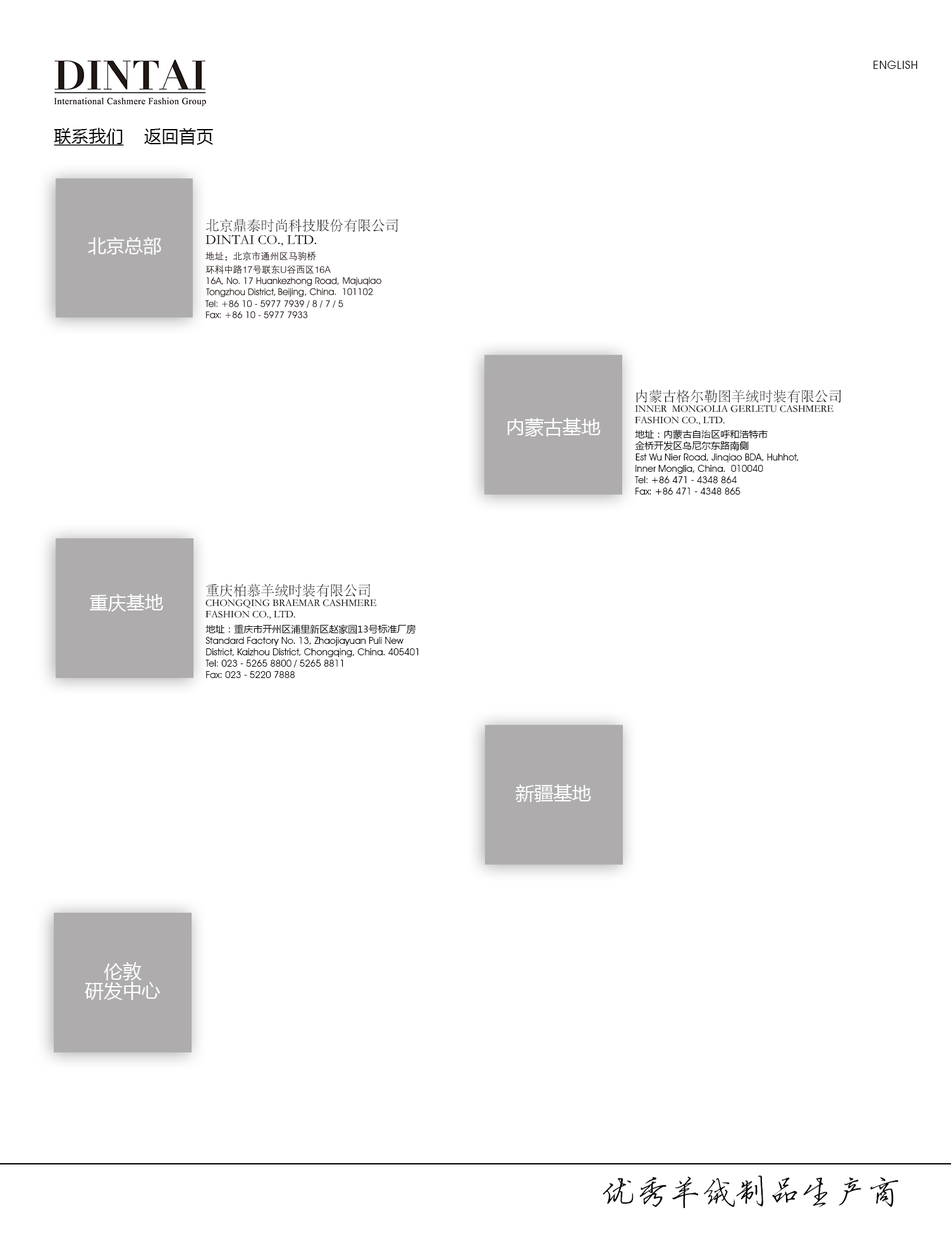
<style>
.page{position:relative;width:951px;height:1253px;background:#ffffff}
.page>*{position:absolute;margin:0}
.t1{font:11.4px "AvantGardeITCbyBT-Book";letter-spacing:0.05em;color:#000000}
.t2{font:17.4px "MicrosoftYaHei";color:#000000;text-decoration:underline}
.t3{font:17.4px "MicrosoftYaHei";color:#000000}
.t4{font:13.8px/15.2px "STSong";color:#000000}
.t5{font:18.4px "MicrosoftYaHei";color:#ffffff}
.t6{font:10.1px/11.4px "STSong";color:#000000}
.t7{font:18.9px "MicrosoftYaHei";color:#ffffff}
.t8{font:9.5px "AvantGardeITCbyBT-Book";color:#000000}
.t9{font:9.5px "MicrosoftYaHei";color:#000000}
.t10{font:18.9px/19px "MicrosoftYaHei";color:#ffffff}
.t11{font:33.3px "FZYBXSJW--GB1-0";color:#000000}
</style>
<div class="page">
<p class="t1" style="left:874px;top:61px;width:44px;height:8px">ENGLISH</p>
<p class="t2" style="left:54px;top:128px;width:159px;height:18px">联系我们<span class="t3">    返回首页</span></p>
<p class="t4" style="left:206px;top:219px;width:193px;height:28px">北京鼎泰时尚科技股份有限公司<br>DINTAI CO., LTD.</p>
<p class="t5" style="left:88px;top:237px;width:73px;height:18px">北京总部</p>
<p class="t6" style="left:635px;top:390px;width:206px;height:35px"><span class="t4">内蒙古格尔勒图羊绒时装有限公司<br></span>INNER  MONGOLIA GERLETU CASHMERE <br>FASHION CO., LTD.</p>
<p class="t7" style="left:508px;top:418px;width:93px;height:19px">内蒙古基地</p>
<p class="t8" style="left:635px;top:430px;width:164px;height:65px"><span class="t9">地址：内蒙古自治区呼和浩特市<br>金桥开发区乌尼尔东路南侧<br>E</span>st Wu Nier Road, Jinqiao BDA, Huhhot, Inner Monglia, China.  010040<br>Tel: +86 471 - 4348 864<br>Fax: +86 471 - 4348 865</p>
<p class="t6" style="left:206px;top:584px;width:171px;height:35px"><span class="t4">重庆柏慕羊绒时装有限公司<br></span>CHONGQING BRAEMAR CASHMERE <br>FASHION CO., LTD.</p>
<p class="t5" style="left:90px;top:594px;width:73px;height:18px">重庆基地</p>
<p class="t8" style="left:206px;top:624px;width:213px;height:54px"><span class="t9">地址：重庆市开州区浦里新区赵家园13号标准厂房<br></span>Standard Factory No. 13, Zhaojiayuan Puli New District, Kaizhou District, Chongqing, China. 405401<br>Tel: 023 - 5265 8800 / 5265 8811<br>Fax: 023 - 5220 7888</p>
<p class="t7" style="left:516px;top:784px;width:76px;height:18px">新疆基地</p>
<p class="t10" style="left:85px;top:962px;width:76px;height:38px;text-align:center">伦敦<br>研发中心</p>
<p class="t11" style="left:603px;top:1175px;width:296px;height:34px">优秀羊绒制品生产商</p>
</div>
